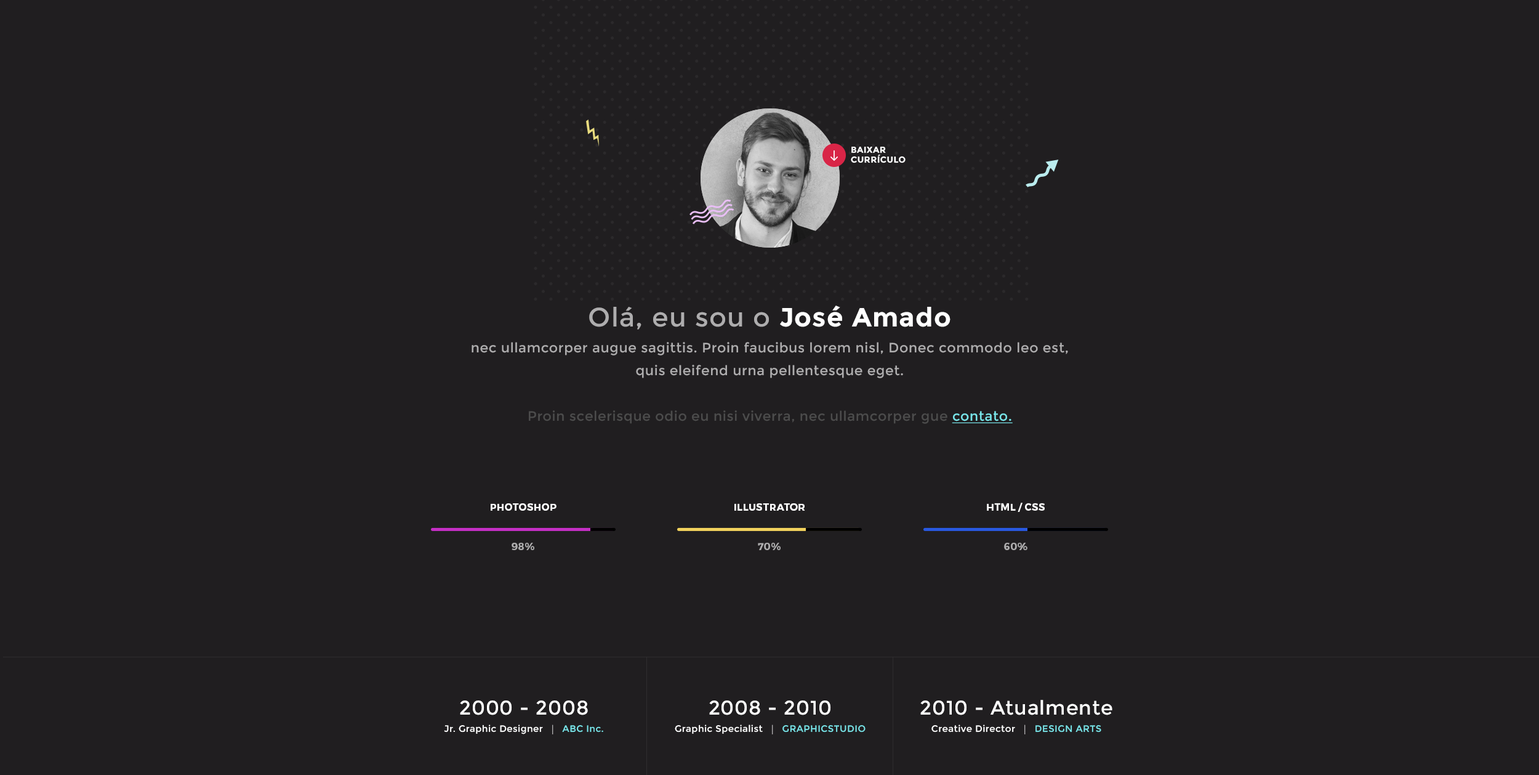
<style>
.page{position:relative;width:1539px;height:775px;background:#201e20}
.page>*{position:absolute;margin:0}
.t1{font:8.6px/9.9px "Montserrat-Bold";letter-spacing:0.03em;color:#ffffff}
.t2{font:13.5px/25.9px "Montserrat-Regular";letter-spacing:0.03em;color:#aeadae}
.t3{font:26.5px/22.8px "Montserrat-Regular";letter-spacing:0.03em;color:#aeadae}
.t4{font:26.5px/22.8px "Montserrat-Bold";letter-spacing:0.03em;color:#ffffff}
.t5{font:13.5px/22.8px "Montserrat-Regular";letter-spacing:0.03em;color:#aeadae}
.t6{font:13.5px/22.8px "Montserrat-Regular";letter-spacing:0.03em;color:#4c4c4c}
.t7{font:13.5px/22.8px "Montserrat-Regular";letter-spacing:0.03em;color:#79e5e9;text-decoration:underline}
.t8{font:9.9px "Montserrat-Bold";letter-spacing:0.03em;color:#ffffff}
.t9{font:9.9px "Montserrat-Bold";letter-spacing:0.03em;color:#aeadae}
.t10{font:9.2px/17.2px "Montserrat-Regular";letter-spacing:0.03em;color:#ffffff}
.t11{font:19.7px/17.2px "Montserrat-Regular";letter-spacing:0.03em;color:#ffffff}
.t12{font:9.2px/17.2px "MyriadPro-Regular";letter-spacing:0.03em;color:#aeadae}
.t13{font:9.2px/17.2px "Montserrat-Regular";letter-spacing:0.03em;color:#79e5e9}
</style>
<div class="page">
<p class="t1" style="left:851px;top:147px;width:55px;height:16px">BAIXAR<br>CURRÍCULO</p>
<p class="t2" style="left:472px;top:305px;width:596px;height:119px;text-align:center"><span class="t3">Olá, eu sou o </span><span class="t4">José Amado<br></span>nec ullamcorper augue sagittis. Proin faucibus lorem nisl, Donec <span class="t5">commodo leo est, quis eleifend urna pellentesque eget. <br><br></span><span class="t6">Proin scelerisque odio eu nisi viverra, nec ullamcorper gue </span><span class="t7">contato.</span></p>
<p class="t8" style="left:491px;top:503px;width:66px;height:7px">PHOTOSHOP</p>
<p class="t8" style="left:735px;top:503px;width:70px;height:7px">ILLUSTRATOR</p>
<p class="t8" style="left:987px;top:502px;width:58px;height:10px">HTML / CSS</p>
<p class="t9" style="left:512px;top:542px;width:22px;height:8px">98%</p>
<p class="t9" style="left:758px;top:542px;width:23px;height:8px">70%</p>
<p class="t9" style="left:1004px;top:542px;width:24px;height:8px">60%</p>
<p class="t10" style="left:444px;top:700px;width:159px;height:34px;text-align:center"><span class="t11">2000 - 2008<br></span>Jr. Graphic Designer   <span class="t12">|   </span><span class="t13">ABC Inc.</span></p>
<p class="t10" style="left:675px;top:700px;width:191px;height:34px;text-align:center"><span class="t11">2008 - 2010<br></span>Graphic Specialist   <span class="t12">|   </span><span class="t13">GRAPHICSTUDIO</span></p>
<p class="t11" style="left:921px;top:699px;width:192px;height:35px;text-align:center">2010 - Atualmente<br><span class="t10">Creative Director   </span><span class="t12">|   </span><span class="t13">DESIGN ARTS</span></p>
</div>
